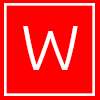
<style>
.page{position:relative;width:100px;height:100px;background:#ff0000}
.page>*{position:absolute;margin:0}
.t1{font:64px "UbuntuNerdFontComplete-Light";color:#ffffff}
</style>
<div class="page">
<p class="t1" style="left:23px;top:26px;width:55px;height:44px">W</p>
</div>
